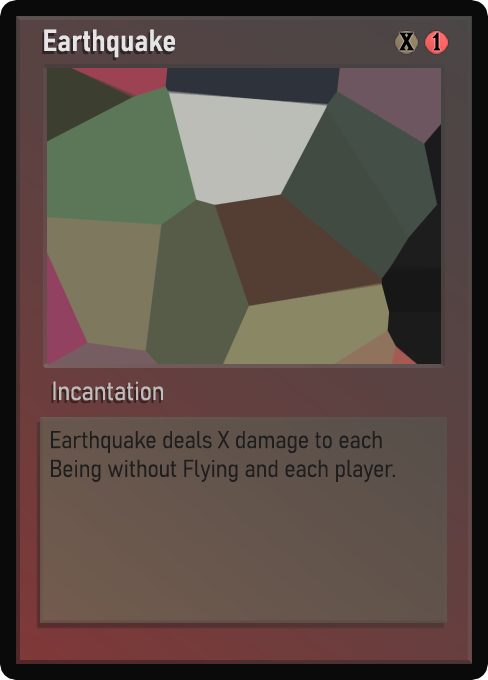
<style>
.page{position:relative;width:488px;height:680px}
.page>*{position:absolute;margin:0}
.t1{font:30px "Bahnschrift-SemiBoldSemiCondensed";color:#f2f2f2;font-weight:bold}
.t2{font:25px "WTRRoycroft";color:#000000;font-weight:bold;scale:1.09 1}
.t3{font:26px "Bahnschrift-LightSemiCondensed";color:#c8c8c8;font-weight:bold}
.t4{font:24px "Bahnschrift-LightSemiCondensed";color:#1e1e1e;font-weight:bold}
</style>
<div class="page">
<p class="t1" style="left:44px;top:29px;width:131px;height:29px;opacity:0.9">Earthquake</p>
<p class="t2" style="left:399px;top:32px;width:15px;height:19px">X</p>
<p class="t2" style="left:432px;top:32px;width:9px;height:19px">1</p>
<p class="t3" style="left:53px;top:381px;width:110px;height:20px;opacity:0.9">Incantation</p>
<p class="t4" style="left:51px;top:431px;width:344px;height:51px">Earthquake deals X damage to each Being without Flying and each player.</p>
</div>
